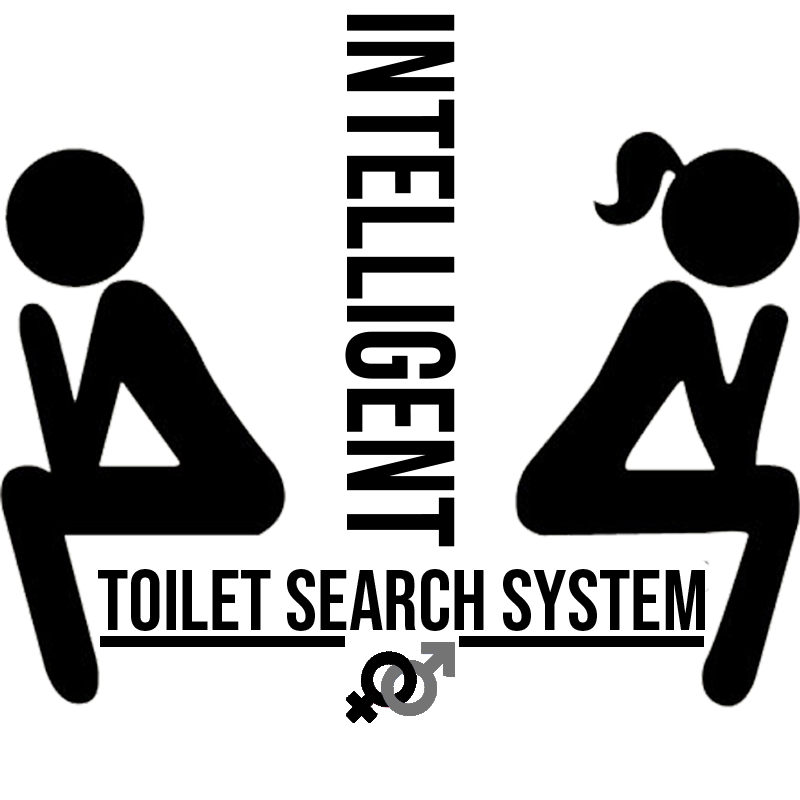
<style>
.page{position:relative;width:800px;height:800px;background:#ffffff}
.page>*{position:absolute;margin:0}
.t1{font:153.1px "BebasNeue-Regular";color:#000000;scale:0.93 1}
.t2{font:86.1px "BebasNeue-Regular";color:#000000}
</style>
<div class="page">
<p class="t1" style="left:345px;top:14px;width:111px;height:533px;rotate:90deg">intelligent</p>
<p class="t2" style="left:98px;top:569px;width:607px;height:62px">Toilet search system</p>
</div>
